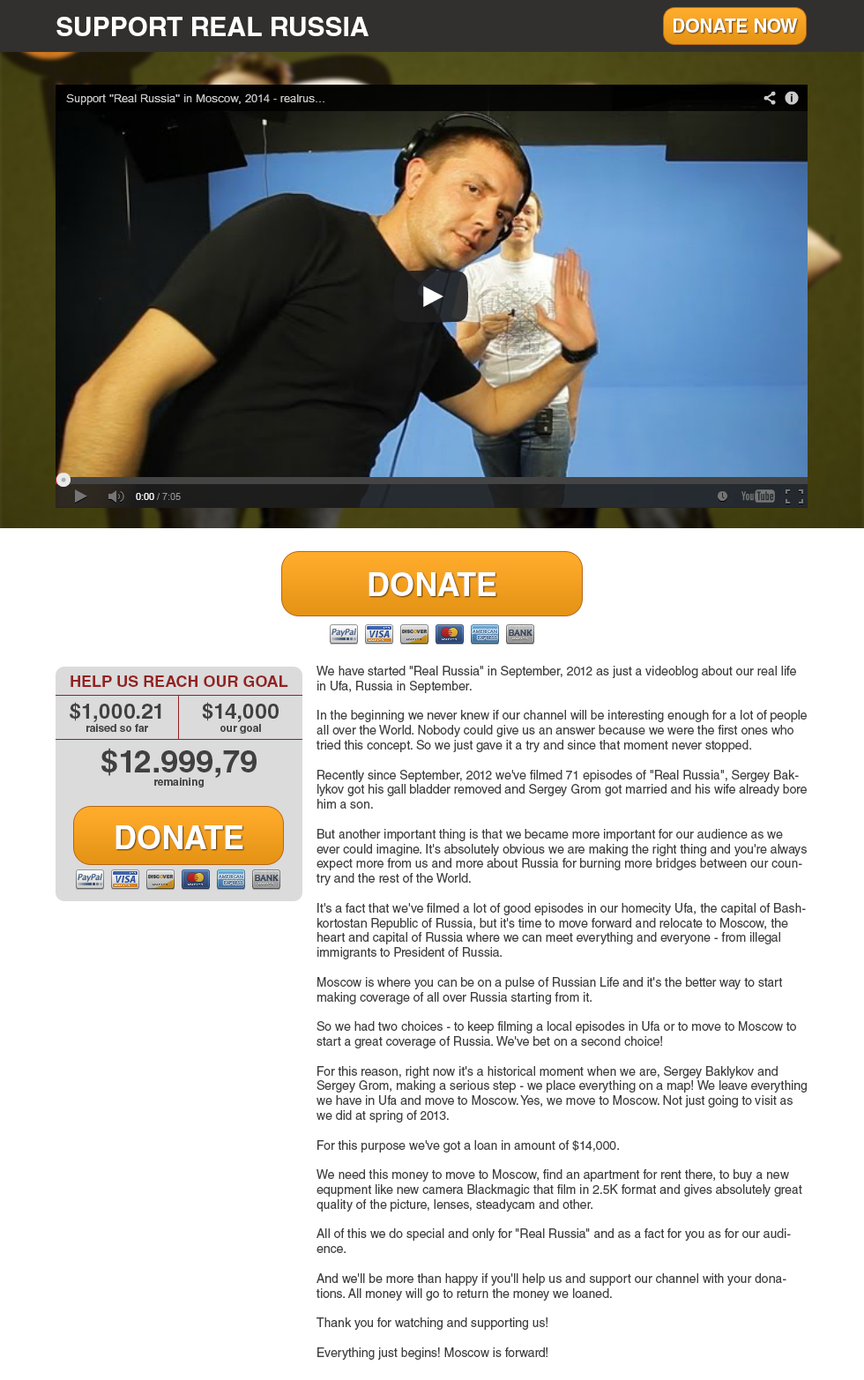
<style>
.page{position:relative;width:864px;height:1380px;background:#ffffff}
.page>*{position:absolute;margin:0}
.t1{font:26.5px "HelveticaLTStd-Bold";color:#ffffff}
.t2{font:18.5px "HelveticaLTStd-Bold";color:#ffffff}
.t3{font:31.7px "HelveticaLTStd-Bold";color:#ffffff}
.t4{font:12.3px "HelveticaLTStd-Roman";color:#404040}
.t5{font:15.9px "HelveticaLTStd-Bold";color:#942121}
.t6{font:10.6px "HelveticaLTStd-Bold";color:#404040}
.t7{font:21.2px "HelveticaLTStd-Bold";color:#404040}
.t8{font:31.7px "HelveticaLTStd-Bold";color:#404040}
</style>
<div class="page">
<p class="t1" style="left:56px;top:17px;width:313px;height:19px">SUPPORT REAL RUSSIA</p>
<p class="t2" style="left:674px;top:19px;width:124px;height:14px">DONATE NOW</p>
<p class="t3" style="left:369px;top:572px;width:127px;height:24px">DONATE</p>
<p class="t4" style="left:317px;top:666px;width:490px;height:694px">We have started "Real Russia" in September, 2012 as just a videoblog about our real life in Ufa, Russia in September.<br> <br>In the beginning we never knew if our channel will be interesting enough for a lot of people all over the World. Nobody could give us an answer because we were the first ones who tried this concept. So we just gave it a try and since that moment never stopped.<br> <br>Recently since September, 2012 we've filmed 71 episodes of "Real Russia", Sergey Baklykov got his gall bladder removed and Sergey Grom got married and his wife already bore him a son.<br> <br>But another important thing is that we became more important for our audience as we ever could imagine. It's absolutely obvious we are making the right thing and you're always expect more from us and more about Russia for burning more bridges between our country and the rest of the World.<br> <br>It's a fact that we've filmed a lot of good episodes in our homecity Ufa, the capital of Bashkortostan Republic of Russia, but it's time to move forward and relocate to Moscow, the heart and capital of Russia where we can meet everything and everyone - from illegal immigrants to President of Russia.<br> <br>Moscow is where you can be on a pulse of Russian Life and it's the better way to start making coverage of all over Russia starting from it.<br> <br>So we had two choices - to keep filming a local episodes in Ufa or to move to Moscow to start a great coverage of Russia. We've bet on a second choice!<br> <br>For this reason, right now it's a historical moment when we are, Sergey Baklykov and Sergey Grom, making a serious step - we place everything on a map! We leave everything we have in Ufa and move to Moscow. Yes, we move to Moscow. Not just going to visit as we did at spring of 2013.<br> <br>For this purpose we've got a loan in amount of $14,000.<br> <br>We need this money to move to Moscow, find an apartment for rent there, to buy a new equpment like new camera Blackmagic that film in 2.5K format and gives absolutely great quality of the picture, lenses, steadycam and other.<br> <br>All of this we do special and only for "Real Russia" and as a fact for you as for our audience.<br> <br>And we'll be more than happy if you'll help us and support our channel with your donations. All money will go to return the money we loaned.<br> <br>Thank you for watching and supporting us!<br> <br>Everything just begins! Moscow is forward!</p>
<p class="t5" style="left:71px;top:675px;width:217px;height:12px">HELP US REACH OUR GOAL</p>
<p class="t6" style="left:70px;top:702px;width:91px;height:30px;text-align:center"><span class="t7">$1,000.21<br></span>raised so far</p>
<p class="t6" style="left:202px;top:702px;width:77px;height:32px;text-align:center"><span class="t7">$14,000<br></span>our goal</p>
<p class="t8" style="left:101px;top:748px;width:156px;height:39px;text-align:center">$12.999,79<br><span class="t6">remaining</span></p>
<p class="t3" style="left:116px;top:825px;width:127px;height:24px">DONATE</p>
</div>
